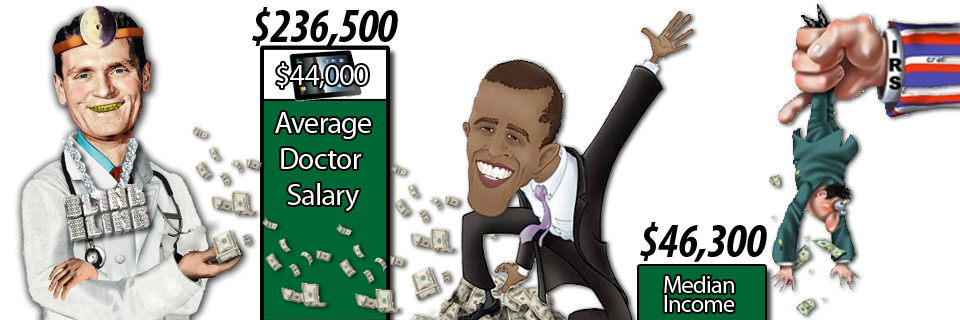
<style>
.page{position:relative;width:960px;height:320px;background:#ffffff}
.page>*{position:absolute;margin:0}
.t1{font:48px "MyriadPro-BoldCondIt";letter-spacing:-0.025em;color:#000000}
.t2{font:30px "MyriadPro-Regular";letter-spacing:-0.025em;color:#ffffff}
.t3{font:24px "MyriadPro-Regular";letter-spacing:-0.025em;color:#ffffff}
</style>
<div class="page">
<p class="t1" style="left:252px;top:7px;width:146px;height:40px">$236,500</p>
<p class="t2" style="left:277px;top:63px;width:91px;height:26px">$44,000</p>
<p class="t2" style="left:275px;top:112px;width:96px;height:100px;text-align:center">Average<br>Doctor <br>Salary</p>
<p class="t1" style="left:640px;top:222px;width:127px;height:40px">$46,300</p>
<p class="t3" style="left:664px;top:276px;width:71px;height:36px">Median<br>Income</p>
</div>
